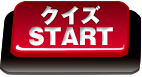
<style>
.page{position:relative;width:142px;height:77px}
.page>*{position:absolute;margin:0}
.t1{font:20px "GothicMB101Pro-Ultra";color:#ffffff}
.t2{font:21.8px "GothicMB101Pro-Ultra";color:#ffffff}
</style>
<div class="page">
<p class="t1" style="left:40px;top:5px;width:61px;height:20px">クイズ</p>
<p class="t2" style="left:29px;top:26px;width:84px;height:20px">START</p>
</div>
